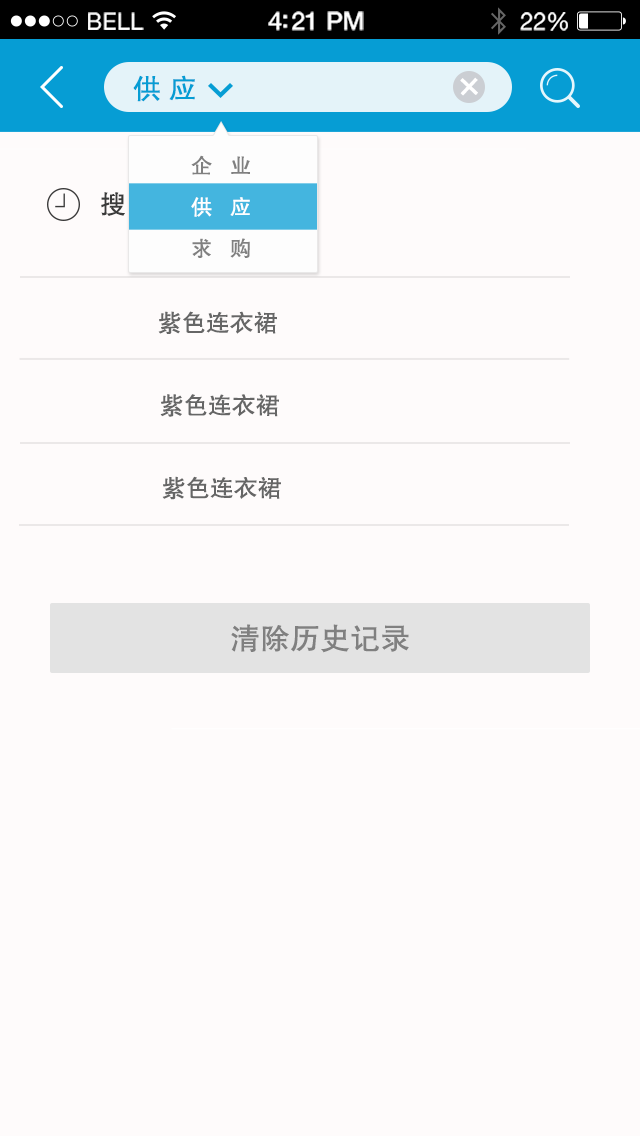
<style>
.page{position:relative;width:640px;height:1136px;background:#fefbfb}
.page>*{position:absolute;margin:0}
.t1{font:23.1px "HelveticaNeue";letter-spacing:0.02em;color:#ffffff}
.t2{font:25.1px "HelveticaNeue-Medium";letter-spacing:-0.02em;color:#ffffff}
.t3{font:24.1px "HelveticaNeue";letter-spacing:-0.02em;color:#ffffff}
.t4{font:28px "FZHTJW--GB1-0";color:#069dd4}
.t5{font:42.3px "MicrosoftYaHei";color:#ffffff}
.t6{font:21.3px/4.7px "FZHTJW--GB1-0";color:#808080}
.t7{font:21.3px/4.7px "MicrosoftYaHei";color:#8d9695}
.t8{font:21.3px/4.7px "FZHTJW--GB1-0";color:#ffffff}
.t9{font:26px "FZHTJW--GB1-0"}
.t10{font:24px "FZHTJW--GB1-0";color:#666666}
.t11{font:30px "FZHTJW--GB1-0";color:#808080}
</style>
<div class="page">
<p class="t1" style="left:88px;top:12px;width:56px;height:18px">BELL</p>
<p class="t2" style="left:268px;top:11px;width:96px;height:20px">4:21 PM</p>
<p class="t3" style="left:520px;top:12px;width:48px;height:19px">22%</p>
<p class="t4" style="left:133px;top:75px;width:62px;height:27px">供 应</p>
<p class="t5" style="left:460px;top:77px;width:18px;height:19px;rotate:43deg">+</p>
<p class="t6" style="left:191px;top:155px;width:59px;height:103px"><span class="t7"><br></span>企   业<br><br><br><br><br><span class="t8">供   应<br><br><br><br><br></span>求   购</p>
<p class="t9" style="left:101px;top:192px;width:102px;height:25px">搜索历史</p>
<p class="t10" style="left:158px;top:311px;width:119px;height:23px">紫色连衣裙</p>
<p class="t10" style="left:160px;top:394px;width:119px;height:23px">紫色连衣裙</p>
<p class="t10" style="left:162px;top:476px;width:119px;height:24px">紫色连衣裙</p>
<p class="t11" style="left:231px;top:624px;width:178px;height:29px">清除历史记录</p>
</div>
